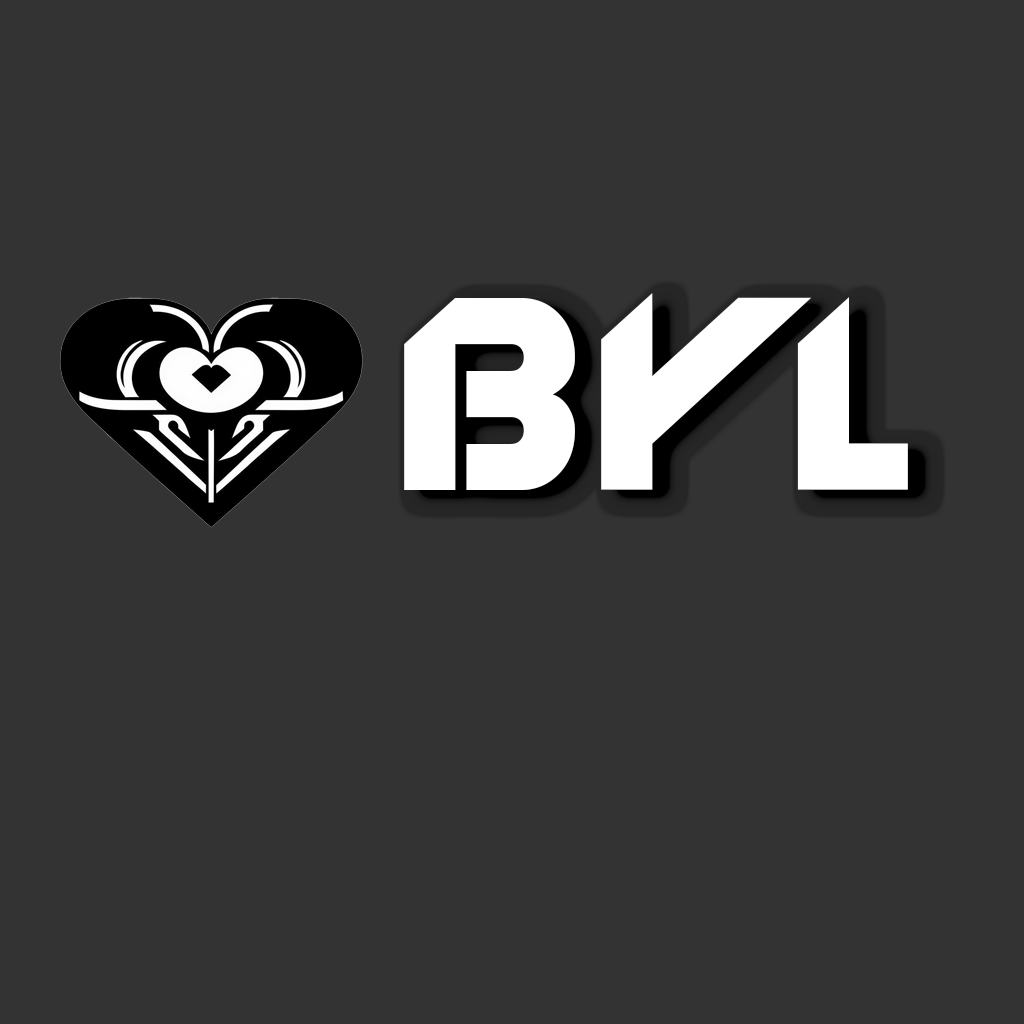
<style>
.page{position:relative;width:1024px;height:1024px;background:#333333}
.page>*{position:absolute;margin:0}
.t1{font:259px "New_Zelek";color:#ffffff}
</style>
<div class="page">
<p class="t1" style="left:404px;top:293px;width:504px;height:197px">BYL</p>
</div>
